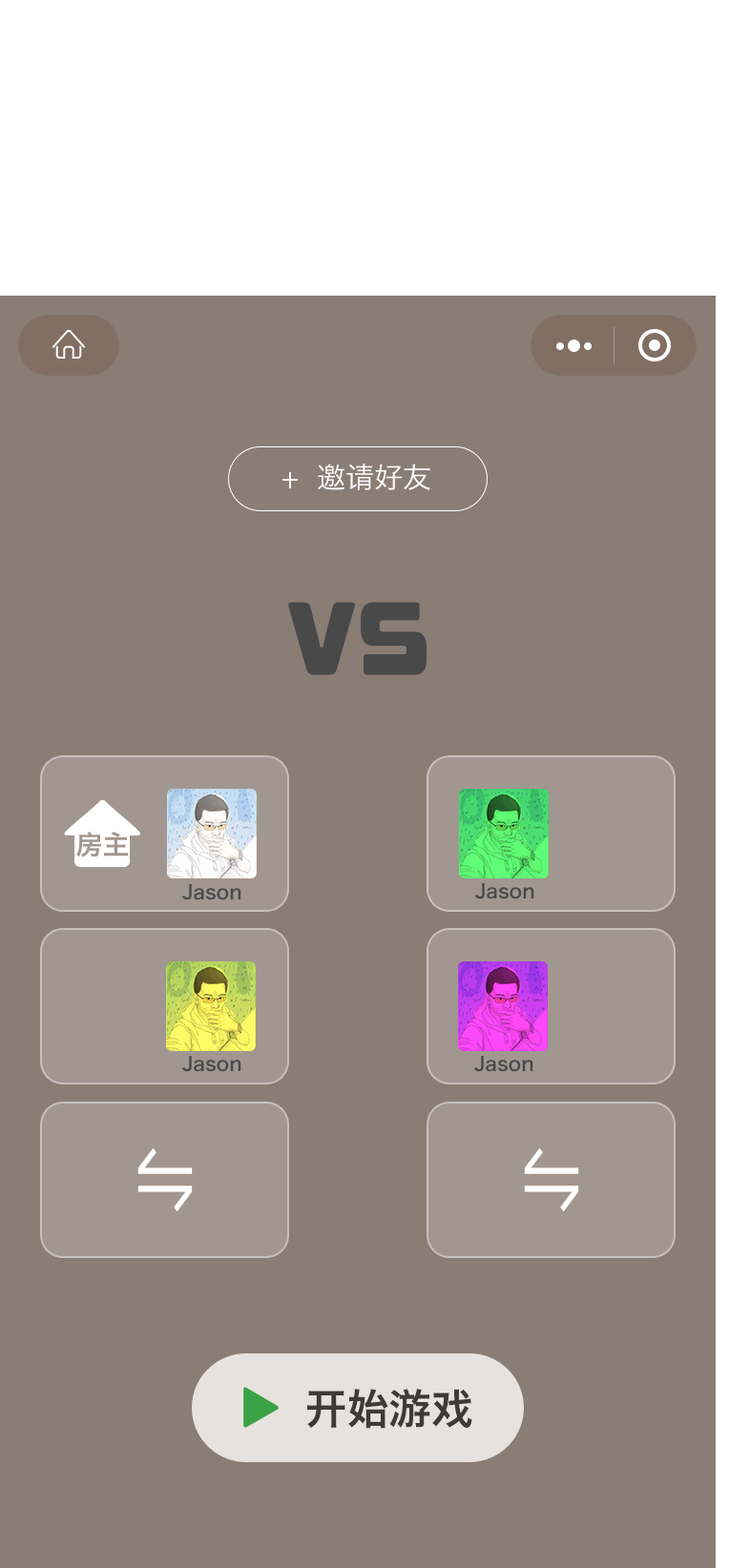
<style>
.page{position:relative;width:729px;height:1568px;background:#8a7d74}
.page>*{position:absolute;margin:0}
.t1{font:28.6px "HiraginoSansGB-W3";color:#ffffff}
.t2{font:19.1px "HiraginoSansGB-W6";color:#494949}
.t3{font:42px "HiraginoSansGB-W6";color:#3e3a3a}
</style>
<div class="page">
<p class="t1" style="left:318px;top:464px;width:112px;height:26px">邀请好友</p>
<p class="t2" style="left:181px;top:884px;width:60px;height:16px">Jason</p>
<p class="t2" style="left:474px;top:883px;width:60px;height:16px">Jason</p>
<p class="t2" style="left:181px;top:1056px;width:60px;height:16px">Jason</p>
<p class="t2" style="left:473px;top:1056px;width:60px;height:16px">Jason</p>
<p class="t3" style="left:307px;top:1389px;width:165px;height:40px">开始游戏</p>
</div>
